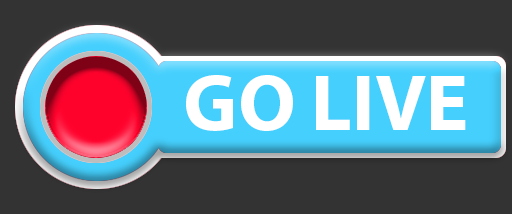
<style>
.page{position:relative;width:512px;height:214px;background:#333333}
.page>*{position:absolute;margin:0}
.t1{font:80px "MyriadPro-Bold";color:#ffffff}
</style>
<div class="page">
<p class="t1" style="left:186px;top:75px;width:280px;height:56px">GO LIVE</p>
</div>
